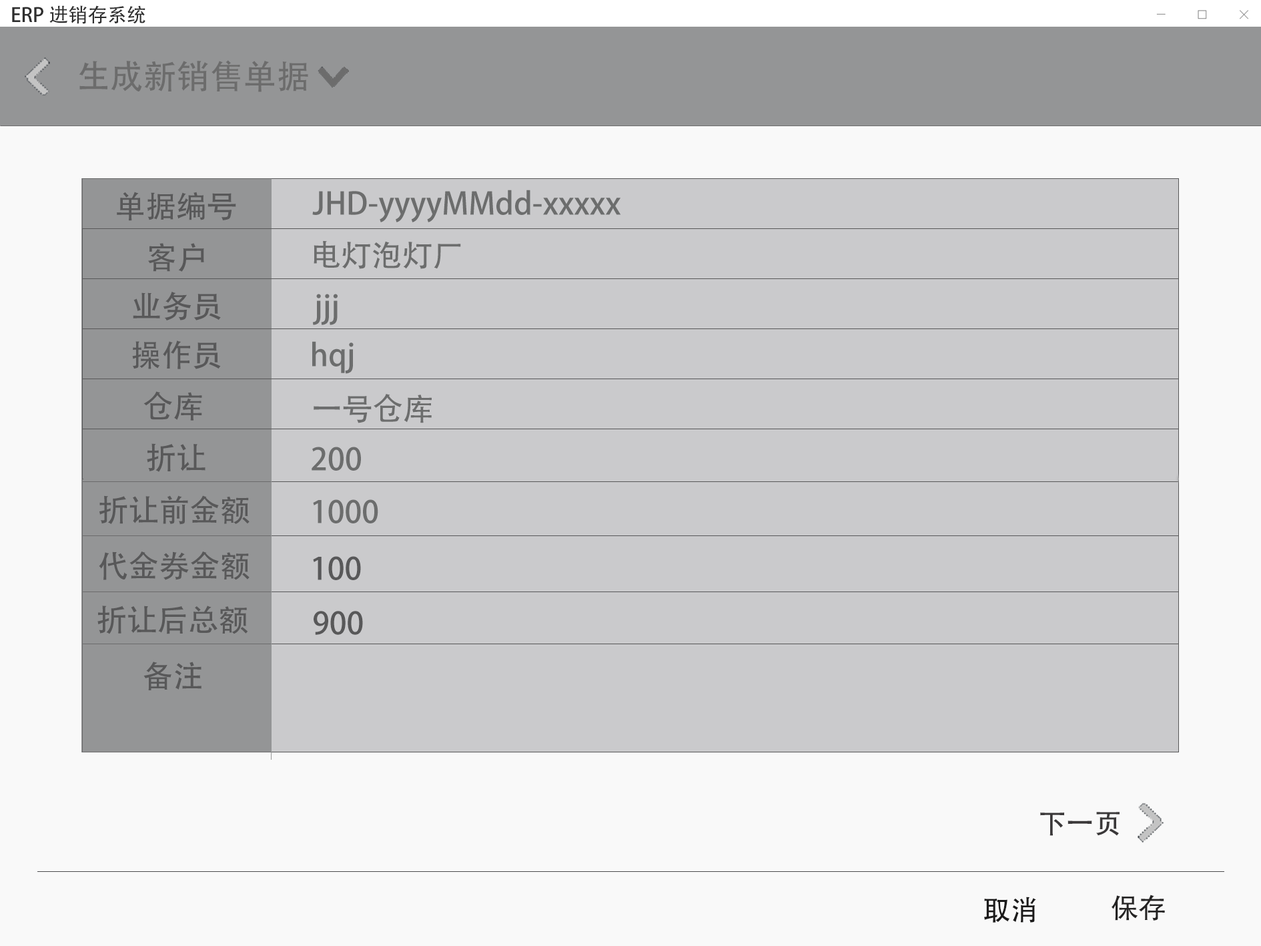
<style>
.page{position:relative;width:1261px;height:946px;background:#cacacc}
.page>*{position:absolute;margin:0}
.t1{font:19.5px "AdobeHeitiStd-Regular";color:#2e2e2e}
.t2{font:33.4px "AdobeHeitiStd-Regular";color:#6c6c6c}
.t3{font:30.6px "AdobeHeitiStd-Regular";color:#585859}
.t4{font:30.6px "AdobeHeitiStd-Regular";color:#6c6d6d}
.t5{font:27.8px "AdobeHeitiStd-Regular";color:#3a3839}
.t6{font:27.8px "AdobeHeitiStd-Regular";color:#1b1a1a}
.t7{font:27.8px "AdobeHeitiStd-Regular";color:#242323}
</style>
<div class="page">
<p class="t1" style="left:12px;top:5px;width:133px;height:19px">ERP进销存系统</p>
<p class="t2" style="left:79px;top:60px;width:229px;height:32px">生成新销售单据</p>
<p class="t3" style="left:117px;top:192px;width:119px;height:29px">单据编号</p>
<p class="t4" style="left:312px;top:190px;width:309px;height:32px">JHD-yyyyMMdd-xxxxx</p>
<p class="t3" style="left:148px;top:243px;width:56px;height:29px">客户</p>
<p class="t4" style="left:314px;top:240px;width:147px;height:29px">电灯泡灯厂</p>
<p class="t3" style="left:133px;top:292px;width:88px;height:28px">业务员</p>
<p class="t4" style="left:312px;top:294px;width:26px;height:31px">jjj</p>
<p class="t3" style="left:132px;top:340px;width:89px;height:29px">操作员</p>
<p class="t4" style="left:312px;top:341px;width:42px;height:33px">hqj</p>
<p class="t3" style="left:143px;top:391px;width:59px;height:29px">仓库</p>
<p class="t4" style="left:314px;top:394px;width:118px;height:29px">一号仓库</p>
<p class="t3" style="left:147px;top:443px;width:59px;height:29px">折让</p>
<p class="t4" style="left:312px;top:446px;width:49px;height:24px">200</p>
<p class="t3" style="left:99px;top:495px;width:151px;height:29px">折让前金额</p>
<p class="t4" style="left:313px;top:499px;width:65px;height:24px">1000</p>
<p class="t3" style="left:99px;top:551px;width:151px;height:29px">代金券金额</p>
<p class="t3" style="left:313px;top:556px;width:48px;height:24px">100</p>
<p class="t3" style="left:97px;top:605px;width:151px;height:29px">折让后总额</p>
<p class="t3" style="left:314px;top:611px;width:49px;height:24px">900</p>
<p class="t3" style="left:143px;top:661px;width:59px;height:29px">备注</p>
<p class="t5" style="left:1040px;top:811px;width:80px;height:24px">下一页</p>
<p class="t6" style="left:984px;top:896px;width:52px;height:26px">取消</p>
<p class="t7" style="left:1112px;top:894px;width:53px;height:26px">保存</p>
</div>
